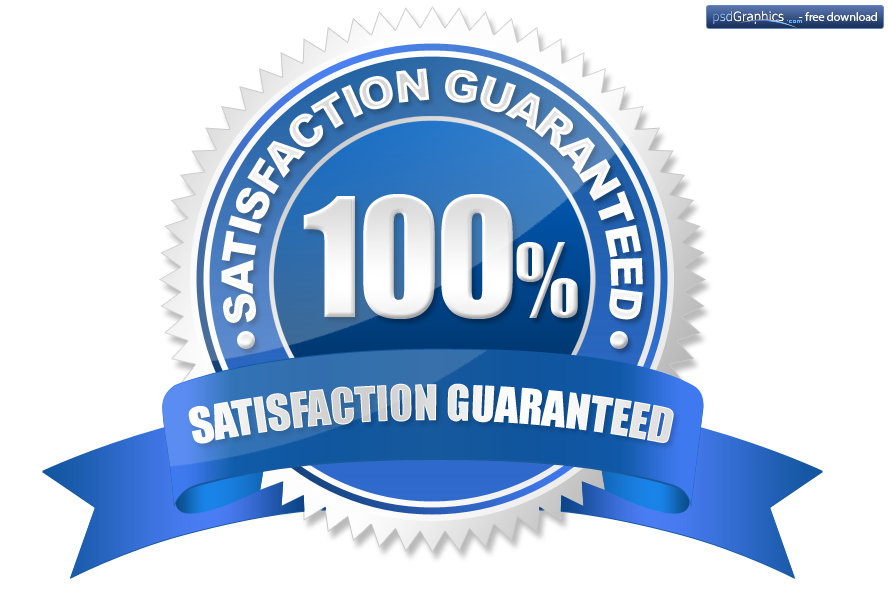
<style>
.page{position:relative;width:889px;height:600px;background:#ffffff}
.page>*{position:absolute;margin:0}
.t1{font:12px "MyriadPro-Regular";color:#ffffff}
.t2{font:6px "ArialMT";letter-spacing:0.2em;color:#5eb1f5}
.t3{font:44px/25px "Arial-Black";letter-spacing:-0.07em;color:#ffffff;text-transform:uppercase}
.t4{font:153.3px "Impact";letter-spacing:-0.025em;color:#ffffff}
.t5{font:93px "Impact";letter-spacing:-0.025em;color:#ffffff}
.t6{font:44.8px "Impact";letter-spacing:-0.01em;color:#ffffff;text-transform:uppercase}
</style>
<div class="page">
<p class="t1" style="left:799px;top:12px;width:78px;height:9px">- free download</p>
<p class="t2" style="left:787px;top:20px;width:15px;height:3px">.com</p>
<p class="t3" style="left:221px;top:68px;width:422px;height:255px">Satisfaction Guaranteed</p>
<p class="t4" style="left:303px;top:194px;width:275px;height:125px">100<span class="t5">%</span></p>
<p class="t6" style="left:188px;top:383px;width:486px;height:61px">Satisfaction Guaranteed</p>
</div>
